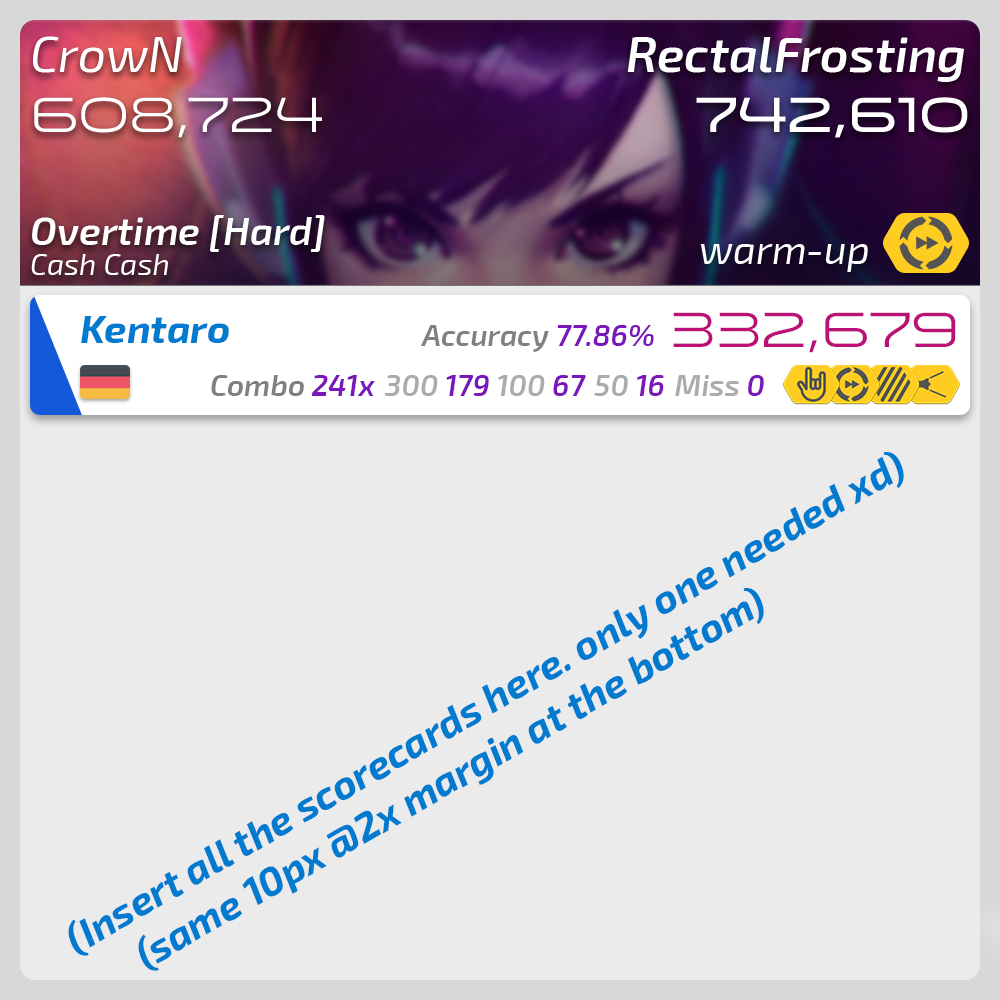
<style>
.page{position:relative;width:1000px;height:1000px;background:#ebebeb}
.page>*{position:absolute;margin:0}
.t1{font:50px "Exo2-Italic";color:#ffffff}
.t2{font:50px "Exo2-SemiBoldItalic";color:#ffffff}
.t3{font:50px "Venera500";color:#ffffff}
.t4{font:50px "Venera700";color:#ffffff}
.t5{font:40px "Exo2-SemiBoldItalic";color:#ffffff}
.t6{font:40px "Exo2-Italic";color:#ffffff}
.t7{font:30px "Exo2-Italic";color:#ffffff}
.t8{font:40px "Exo2-BoldItalic";color:#017acf}
.t9{font:50px "Venera500";color:#bb1177}
.t10{font:30px "Exo2-SemiBoldItalic";color:#808080}
.t11{font:30px "Exo2-SemiBoldItalic";color:#7818bb}
.t12{font:30px "Exo2-SemiBoldItalic";color:#ababab}
</style>
<div class="page">
<p class="t1" style="left:33px;top:36px;width:149px;height:37px">CrowN</p>
<p class="t2" style="left:627px;top:37px;width:338px;height:45px">RectalFrosting</p>
<p class="t3" style="left:34px;top:97px;width:288px;height:41px">608,724</p>
<p class="t4" style="left:696px;top:97px;width:272px;height:41px">742,610</p>
<p class="t5" style="left:32px;top:215px;width:293px;height:37px">Overtime [Hard]</p>
<p class="t6" style="left:700px;top:244px;width:168px;height:28px">warm-up</p>
<p class="t7" style="left:31px;top:254px;width:137px;height:21px">Cash Cash</p>
<p class="t8" style="left:81px;top:316px;width:148px;height:27px">Kentaro</p>
<p class="t9" style="left:673px;top:312px;width:283px;height:41px">332,679</p>
<p class="t10" style="left:421px;top:325px;width:233px;height:27px">Accuracy <span class="t11">77.86%</span></p>
<p class="t10" style="left:211px;top:375px;width:164px;height:21px">Combo <span class="t11">241x</span></p>
<p class="t12" style="left:384px;top:375px;width:105px;height:21px">300 <span class="t11">179</span></p>
<p class="t12" style="left:498px;top:375px;width:88px;height:21px">100 <span class="t11">67</span></p>
<p class="t12" style="left:594px;top:375px;width:70px;height:21px">50 <span class="t11">16</span></p>
<p class="t12" style="left:675px;top:375px;width:89px;height:21px">Miss <span class="t11">0</span></p>
<p class="t8" style="left:68px;top:452px;width:836px;height:519px;rotate:-30deg">(Insert all the scorecards here. only one needed xd)<br>      (same 10px @2x margin at the bottom)</p>
</div>
